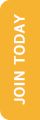
<style>
.page{position:relative;width:40px;height:120px;background:#f6b331}
.page>*{position:absolute;margin:0}
.t1{font:16px "Karla-Regular";letter-spacing:0.025em;color:#ffffff;text-transform:uppercase;font-weight:bold}
</style>
<div class="page">
<p class="t1" style="left:13px;top:14px;width:12px;height:91px;rotate:-90deg">Join TODAY</p>
</div>
